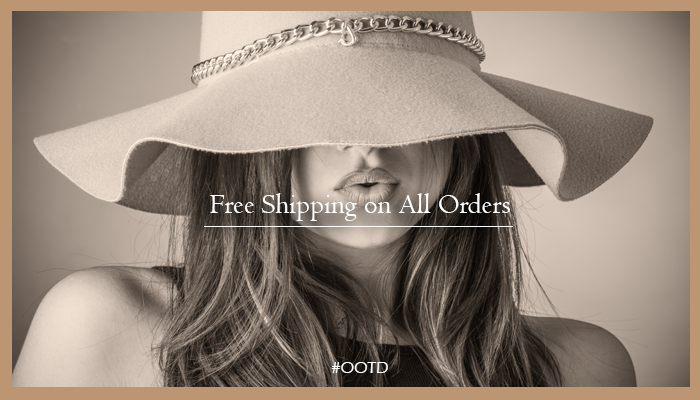
<style>
.page{position:relative;width:700px;height:400px}
.page>*{position:absolute;margin:0}
.t1{font:29.2px "Centaur";color:#ffffff}
.t2{font:16.7px "ErasITC-Medium";color:#ffffff}
</style>
<div class="page">
<p class="t1" style="left:210px;top:193px;width:300px;height:28px">Free Shipping on All Orders</p>
<p class="t2" style="left:331px;top:362px;width:57px;height:11px">#OOTD</p>
</div>
